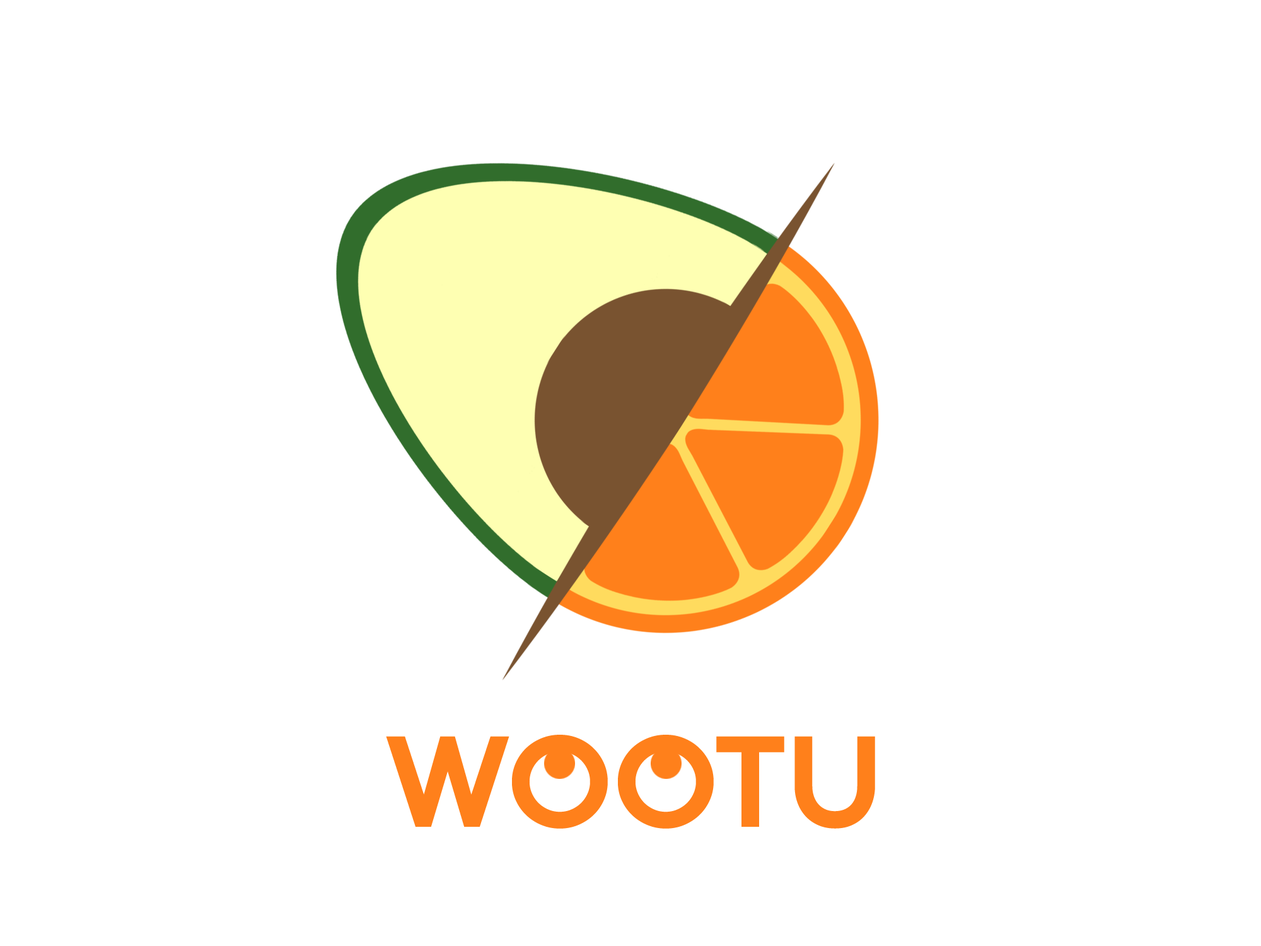
<style>
.page{position:relative;width:1261px;height:946px;background:#ffffff}
.page>*{position:absolute;margin:0}
.t1{font:112.9px "KeepCalm-Medium";color:#ff801b}
</style>
<div class="page">
<p class="t1" style="left:386px;top:734px;width:489px;height:94px">WOOTU</p>
</div>
